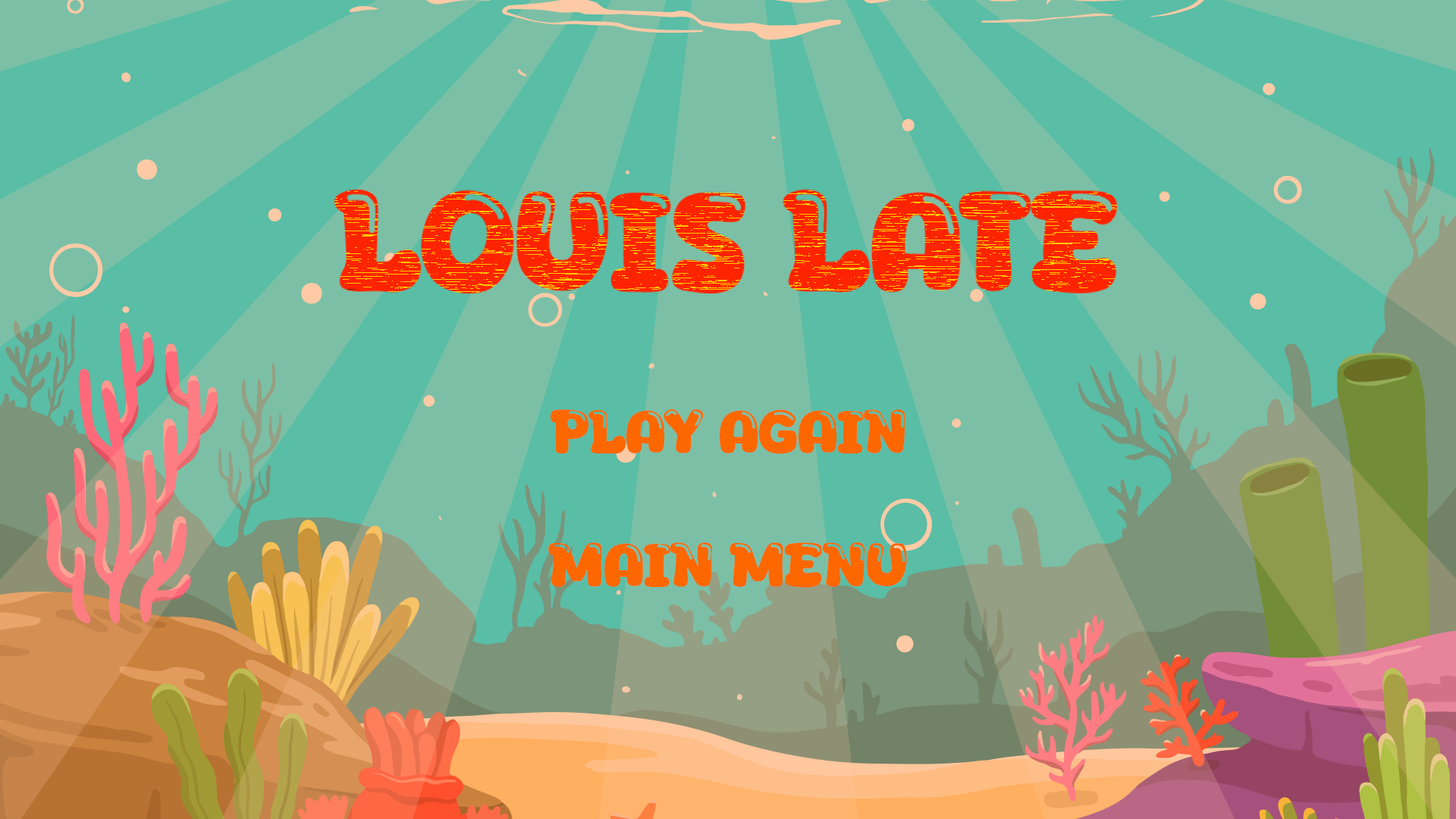
<style>
.page{position:relative;width:1456px;height:819px;background:#7bc0a6}
.page>*{position:absolute;margin:0}
.t1{font:62.9px "Aqua-Wow";color:#fd6700}
.t2{font:63.7px "Aqua-Wow";color:#fd6700}
</style>
<div class="page">
<p class="t1" style="left:551px;top:409px;width:354px;height:45px">PLAY AGAIN</p>
<p class="t2" style="left:548px;top:542px;width:359px;height:46px">mAIN mENU</p>
</div>
